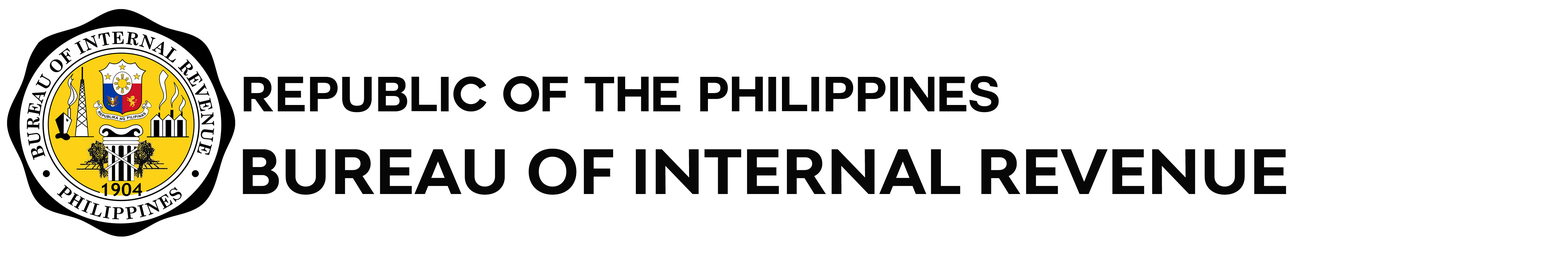
<style>
.page{position:relative;width:1568px;height:261px;background:#ffffff}
.page>*{position:absolute;margin:0}
.t1{font:48.4px "Couture-Bold";color:#050505}
.t2{font:60.5px "Adlinnaka-BoldDemo";color:#070707}
</style>
<div class="page">
<p class="t1" style="left:244px;top:76px;width:755px;height:36px">REPUBLIC OF THE PHILIPPINES</p>
<p class="t2" style="left:243px;top:149px;width:1043px;height:46px">BUREAU OF INTERNAL REVENUE</p>
</div>
